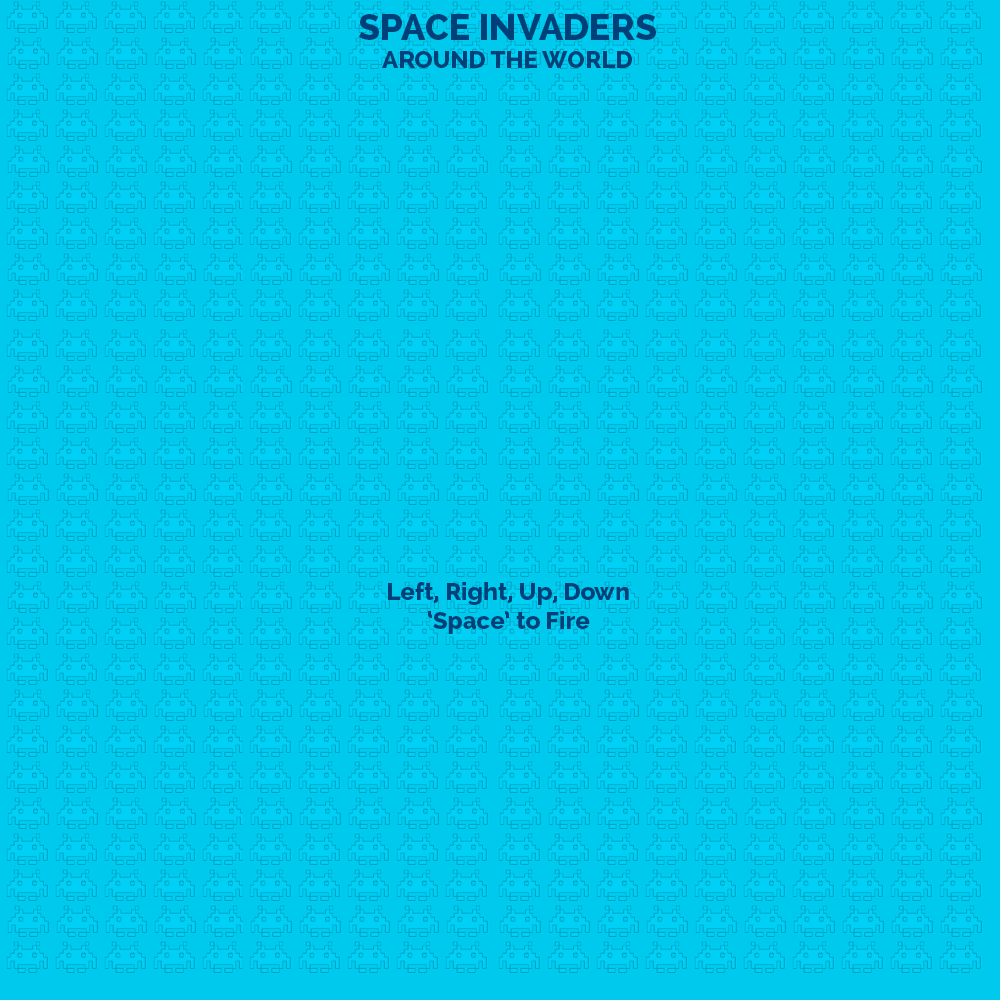
<style>
.page{position:relative;width:1000px;height:1000px;background:#00c9ee}
.page>*{position:absolute;margin:0}
.t1{font:36px "Raleway-ExtraBold";color:#004078}
.t2{font:24px "Raleway-ExtraBold";color:#004078}
.t3{font:24.1px "Raleway-ExtraBold";color:#004078}
</style>
<div class="page">
<p class="t1" style="left:359px;top:14px;width:297px;height:26px">SPACE INVADERS<br><span class="t2"></span></p>
<p class="t2" style="left:382px;top:51px;width:250px;height:17px">AROUND THE WORLD</p>
<p class="t3" style="left:388px;top:582px;width:241px;height:52px;text-align:center">Left, Right, Up, Down<br>‘Space’ to Fire</p>
</div>
